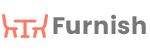
<style>
.page{position:relative;width:150px;height:50px;background:#ffffff}
.page>*{position:absolute;margin:0}
.t1{font:24px "Poppins-Bold";letter-spacing:0.025em;color:#777777}
</style>
<div class="page">
<p class="t1" style="left:53px;top:14px;width:93px;height:21px">Furnish</p>
</div>
